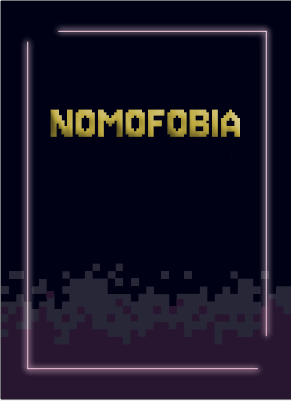
<style>
.page{position:relative;width:291px;height:401px;background:#000115}
.page>*{position:absolute;margin:0}
.t1{font:50px "Jersey10-Regular";letter-spacing:0.025em}
</style>
<div class="page">
<p class="t1" style="left:50px;top:109px;width:190px;height:28px">NOMOFOBIA</p>
</div>
